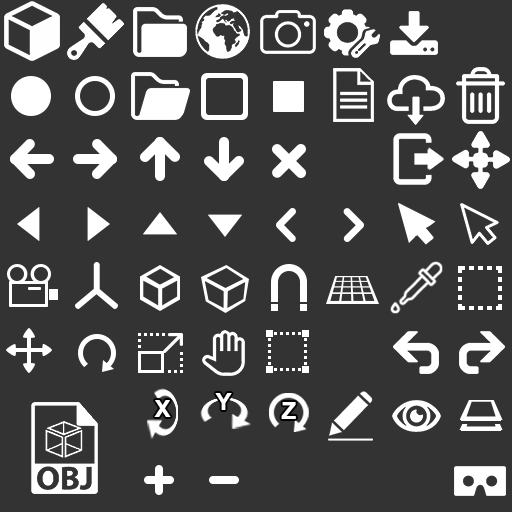
<style>
.page{position:relative;width:512px;height:512px;background:#333333}
.page>*{position:absolute;margin:0}
.t1{font:23.5px "Arial-BoldMT";color:#ffffff}
</style>
<div class="page">
<p class="t1" style="left:154px;top:400px;width:17px;height:17px">X</p>
<p class="t1" style="left:215px;top:393px;width:17px;height:17px">Y</p>
<p class="t1" style="left:281px;top:402px;width:15px;height:17px">Z</p>
</div>
